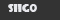
<style>
.page{position:relative;width:60px;height:20px;background:#333333}
.page>*{position:absolute;margin:0}
.t1{font:11.1px "ShowcardGothic-Reg";color:#e7e8ec}
</style>
<div class="page">
<p class="t1" style="left:8px;top:4px;width:29px;height:8px">SIIGO</p>
</div>
